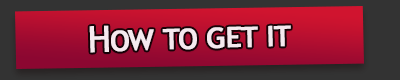
<style>
.page{position:relative;width:400px;height:80px;background:#333333}
.page>*{position:absolute;margin:0}
.t1{font:36px "TrebuchetMS";letter-spacing:-0.05em;color:#f5e9ee;font-variant:small-caps;font-weight:bold;scale:0.95 1}
</style>
<div class="page">
<p class="t1" style="left:89px;top:25px;width:202px;height:28px;rotate:-2deg">How to get it</p>
</div>
